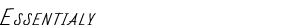
<style>
.page{position:relative;width:300px;height:25px;background:#ffffff}
.page>*{position:absolute;margin:0}
.t1{font:17px "BadScript-Regular";letter-spacing:0.2em;color:#000000;font-variant:small-caps;font-weight:bold;font-style:italic}
</style>
<div class="page">
<p class="t1" style="left:0px;top:8px;width:96px;height:18px">Essentialy</p>
</div>
